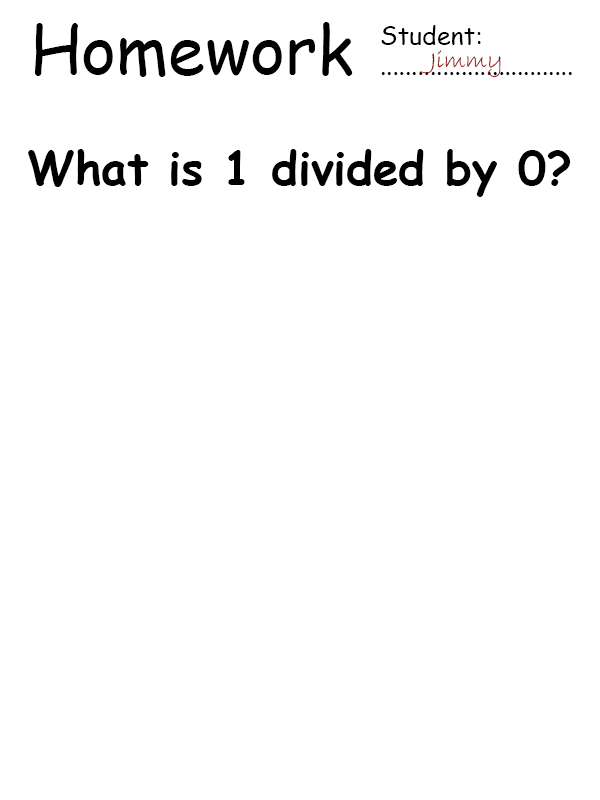
<style>
.page{position:relative;width:600px;height:800px;background:#ffffff}
.page>*{position:absolute;margin:0}
.t1{font:66.7px "ComicSansMS";color:#000000}
.t2{font:25px "ComicSansMS";color:#000000}
.t3{font:25px "BradleyHandITC";color:#960000}
.t4{font:45.8px "ComicSansMS-Bold";color:#000000}
</style>
<div class="page">
<p class="t1" style="left:35px;top:22px;width:318px;height:55px">Homework</p>
<p class="t2" style="left:381px;top:25px;width:191px;height:50px">Student:<br>...............................</p>
<p class="t3" style="left:420px;top:50px;width:81px;height:27px">Jimmy</p>
<p class="t4" style="left:28px;top:149px;width:543px;height:48px">What is 1 divided by 0?</p>
</div>
